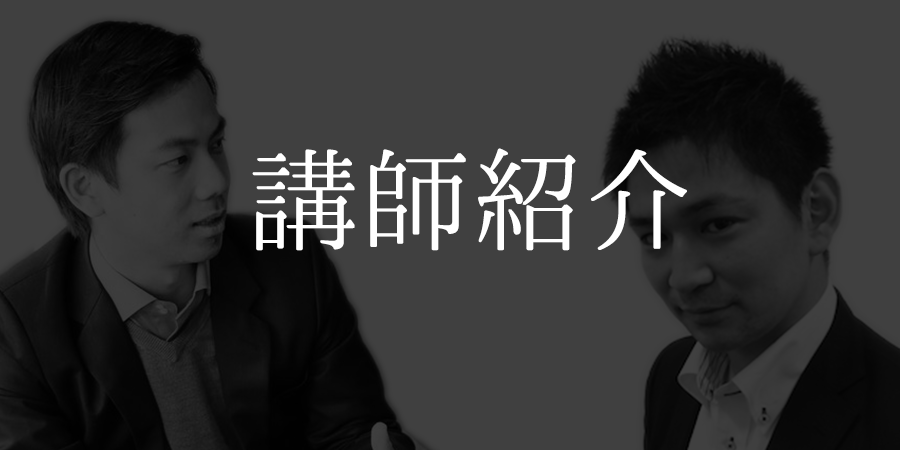
<style>
.page{position:relative;width:900px;height:450px;background:#404040}
.page>*{position:absolute;margin:0}
.t1{font:112px "02UtsukushiMincho";color:#ffffff}
</style>
<div class="page">
<p class="t1" style="left:252px;top:148px;width:435px;height:103px">講師紹介</p>
</div>
